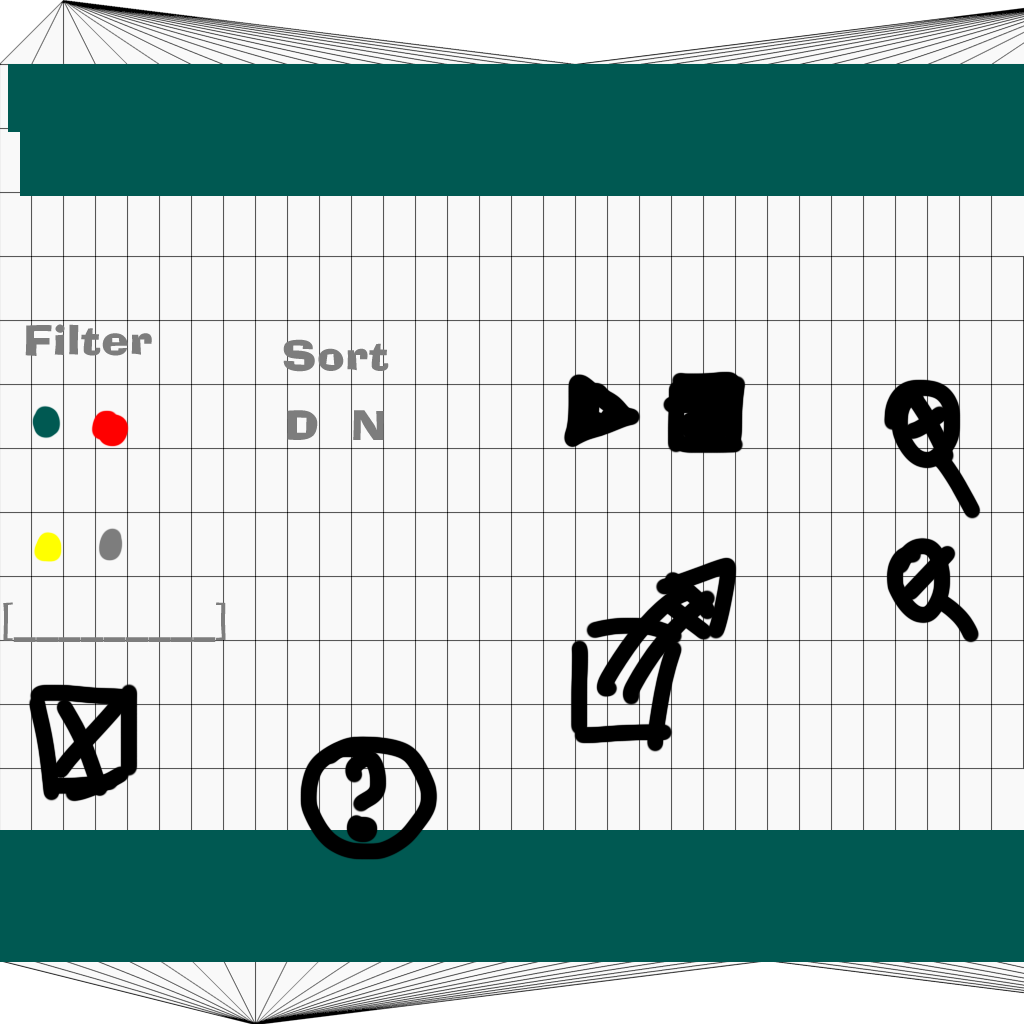
<style>
.page{position:relative;width:1024px;height:1024px;background:#f9f9f9}
.page>*{position:absolute;margin:0}
.t1{font:40px "AdLibBT-Regular";letter-spacing:0.01em;color:#7d7d7d;scale:1.1 1}
</style>
<div class="page">
<p class="t1" style="left:25px;top:324px;width:127px;height:32px">Filter</p>
<p class="t1" style="left:283px;top:339px;width:106px;height:33px">Sort</p>
<p class="t1" style="left:287px;top:410px;width:31px;height:30px">D</p>
<p class="t1" style="left:353px;top:410px;width:31px;height:30px">N</p>
<p class="t1" style="left:3px;top:602px;width:223px;height:40px">[_________]</p>
</div>
